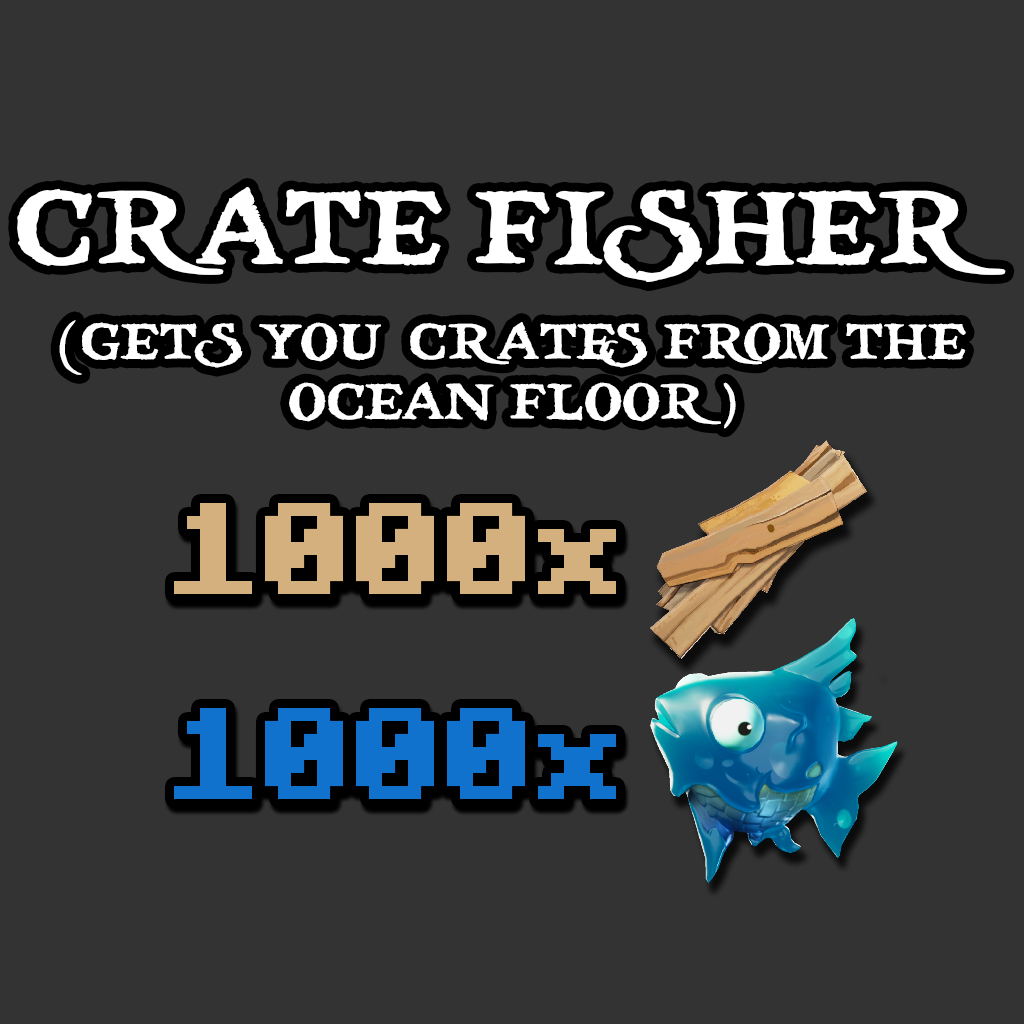
<style>
.page{position:relative;width:1024px;height:1024px;background:#333333}
.page>*{position:absolute;margin:0}
.t1{font:103.6px "treasuremap";color:#ffffff}
.t2{font:50px "treasuremap";color:#ffffff}
.t3{font:130px "Minecraft-Bold";color:#d4b07f}
.t4{font:130px "Minecraft-Bold";color:#1172cd}
</style>
<div class="page">
<p class="t1" style="left:17px;top:186px;width:989px;height:96px">CRATE FISHER</p>
<p class="t2" style="left:59px;top:320px;width:907px;height:109px;text-align:center">(GETS YOU  CRATES FROM THE<br>OCEAN FLOOR)</p>
<p class="t3" style="left:174px;top:503px;width:442px;height:91px">1000x</p>
<p class="t4" style="left:174px;top:708px;width:442px;height:91px">1000x</p>
</div>
